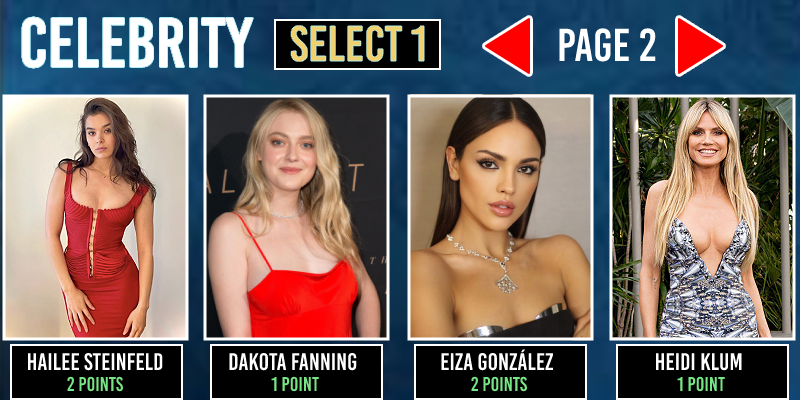
<style>
.page{position:relative;width:800px;height:400px}
.page>*{position:absolute;margin:0}
.t1{font:70px "BebasKai";color:#ffffff}
.t2{font:50px "BebasKai";color:#f1d16d}
.t3{font:46px "BebasKai";color:#ffffff}
.t4{font:24px "BebasKai";color:#ffffff}
.t5{font:20px "BebasKai";color:#78e585}
</style>
<div class="page">
<p class="t1" style="left:22px;top:17px;width:232px;height:51px">Celebrity</p>
<p class="t2" style="left:291px;top:25px;width:133px;height:37px">Select 1</p>
<p class="t3" style="left:559px;top:28px;width:97px;height:34px">Page 2</p>
<p class="t4" style="left:27px;top:352px;width:136px;height:19px">Hailee Steinfeld</p>
<p class="t4" style="left:229px;top:352px;width:128px;height:19px">Dakota Fanning</p>
<p class="t4" style="left:441px;top:349px;width:112px;height:22px">Eiza González</p>
<p class="t4" style="left:655px;top:353px;width:87px;height:18px">Heidi Klum</p>
<p class="t5" style="left:67px;top:376px;width:56px;height:16px">2 points</p>
<p class="t5" style="left:271px;top:376px;width:48px;height:16px">1 point</p>
<p class="t5" style="left:471px;top:376px;width:56px;height:16px">2 points</p>
<p class="t5" style="left:677px;top:376px;width:48px;height:16px">1 point</p>
</div>
